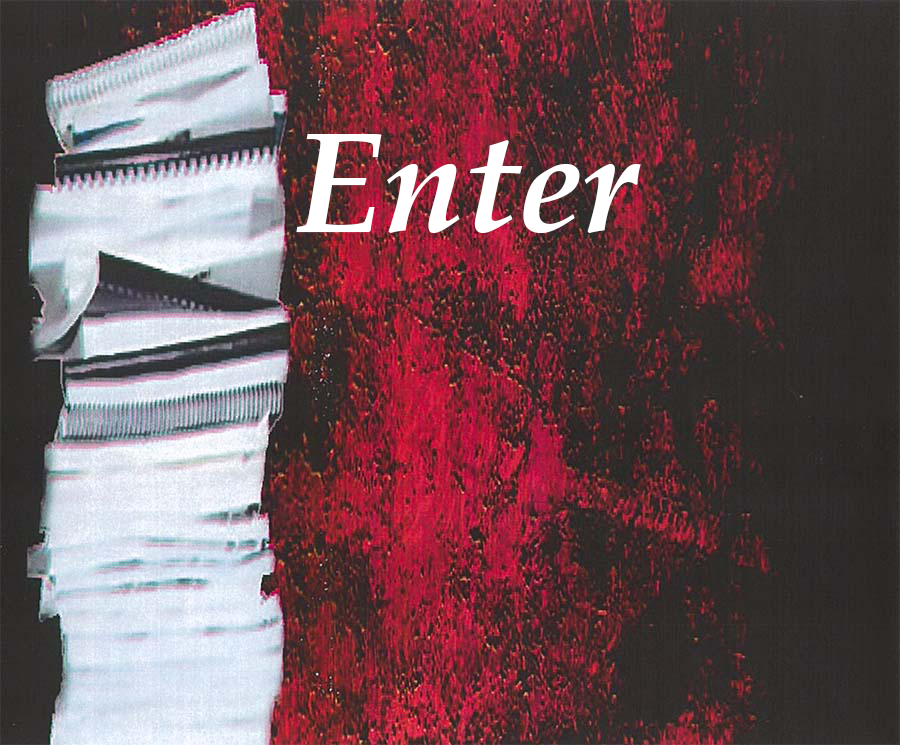
<style>
.page{position:relative;width:900px;height:745px}
.page>*{position:absolute;margin:0}
.t1{font:141.7px "BookAntiqua-BoldItalic";color:#ffffff}
</style>
<div class="page">
<p class="t1" style="left:296px;top:134px;width:345px;height:99px">Enter</p>
</div>
